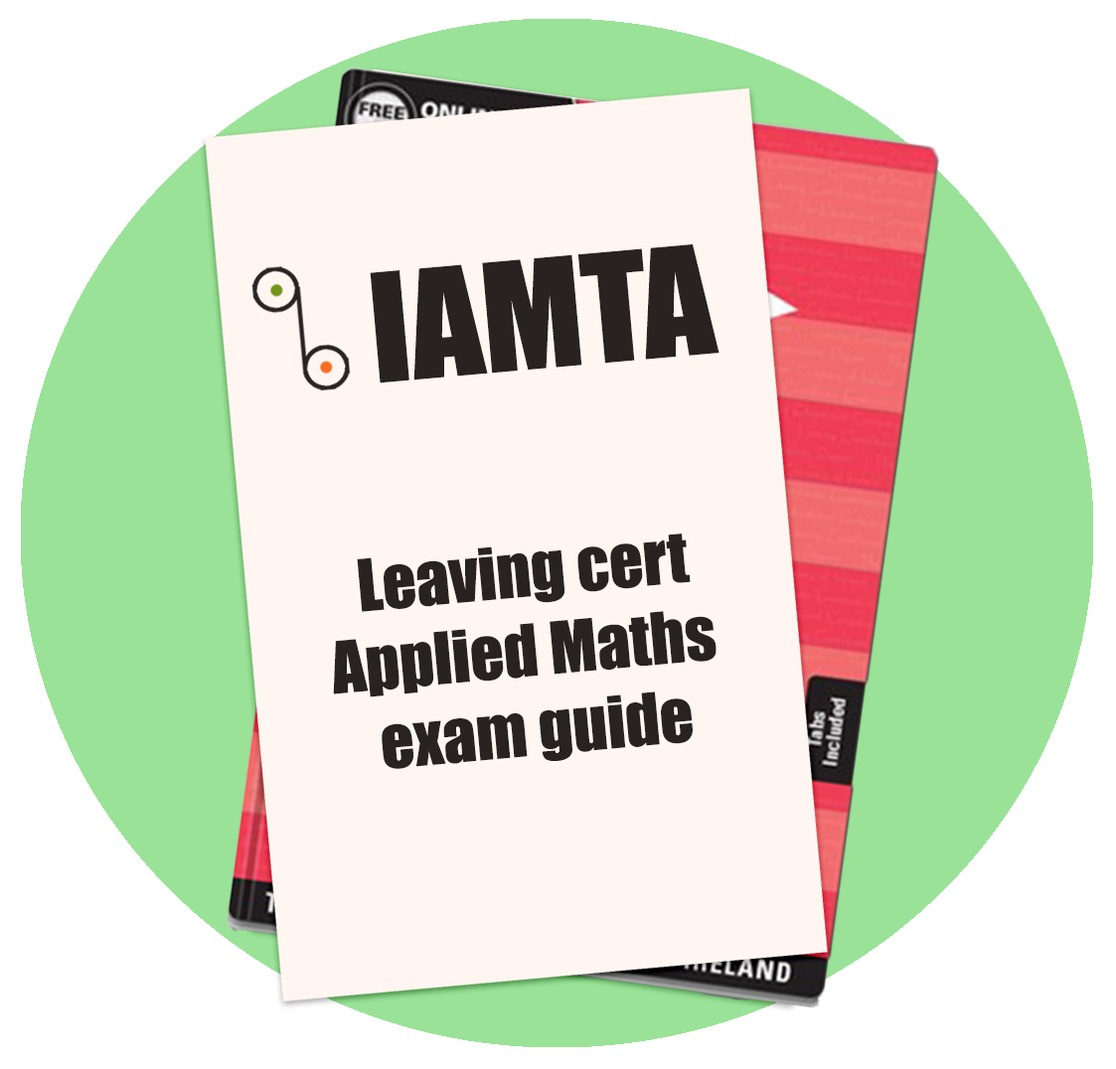
<style>
.page{position:relative;width:1116px;height:1069px;background:#fff6f1}
.page>*{position:absolute;margin:0}
.t1{font:139.3px "Impact";color:#282320}
.t2{font:66.2px "Impact";color:#282320}
</style>
<div class="page">
<p class="t1" style="left:370px;top:244px;width:349px;height:139px;rotate:-5deg">IAMTA</p>
<p class="t2" style="left:333px;top:533px;width:383px;height:236px;text-align:center;rotate:-5deg">Leaving cert<br>Applied Maths <br>exam guide</p>
</div>
